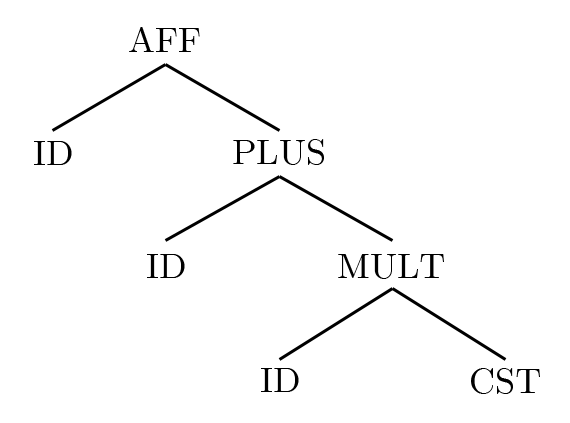
<style>
.page{position:relative;width:570px;height:423px;background:#ffffff}
.page>*{position:absolute;margin:0}
.t1{font:36px "CMUSerif-Roman";color:#000000}
</style>
<div class="page">
<p class="t1" style="left:129px;top:27px;width:71px;height:25px">AFF</p>
<p class="t1" style="left:34px;top:141px;width:38px;height:24px">ID</p>
<p class="t1" style="left:233px;top:139px;width:91px;height:26px">PLUS</p>
<p class="t1" style="left:147px;top:254px;width:38px;height:24px">ID</p>
<p class="t1" style="left:338px;top:254px;width:106px;height:25px">MULT</p>
<p class="t1" style="left:261px;top:368px;width:38px;height:24px">ID</p>
<p class="t1" style="left:471px;top:368px;width:69px;height:26px">CST</p>
</div>
